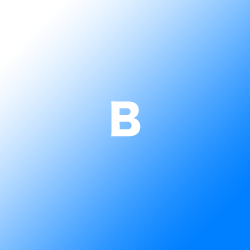
<style>
.page{position:relative;width:250px;height:250px}
.page>*{position:absolute;margin:0}
.t1{font:41.7px "HiraKakuStd-W8";letter-spacing:0.025em;color:#ffffff}
</style>
<div class="page">
<p class="t1" style="left:111px;top:101px;width:30px;height:36px">B</p>
</div>
